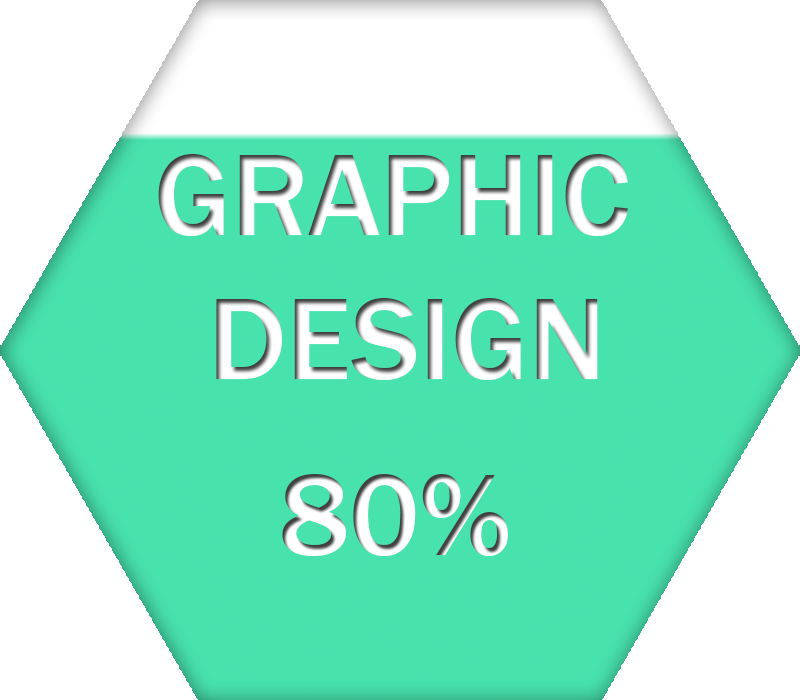
<style>
.page{position:relative;width:800px;height:700px;background:#ffffff}
.page>*{position:absolute;margin:0}
.t1{font:120px "FranklinGothic-Medium";color:#ffffff}
.t2{font:120px "FranklinGothic-Medium"}
</style>
<div class="page">
<p class="t1" style="left:158px;top:154px;width:470px;height:226px;text-align:center">GRAPHIC <br>DESIGN</p>
<p class="t2" style="left:282px;top:474px;width:226px;height:82px">80%</p>
</div>
